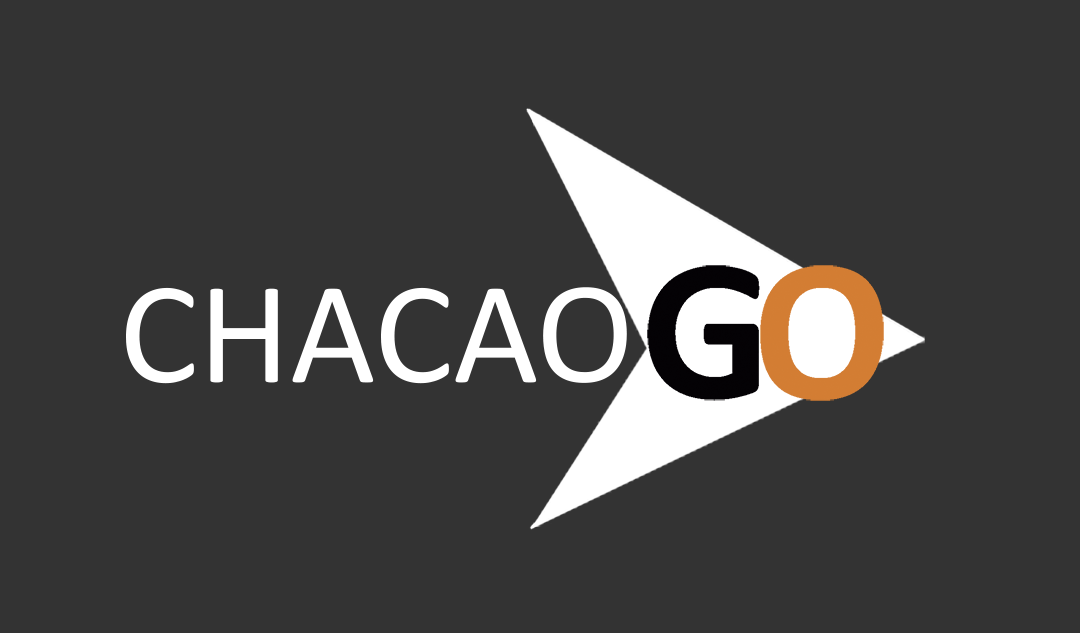
<style>
.page{position:relative;width:1080px;height:633px;background:#333333}
.page>*{position:absolute;margin:0}
.t1{font:147.4px "Calibri";color:#ffffff}
</style>
<div class="page">
<p class="t1" style="left:126px;top:287px;width:501px;height:97px">CHACAO</p>
</div>
